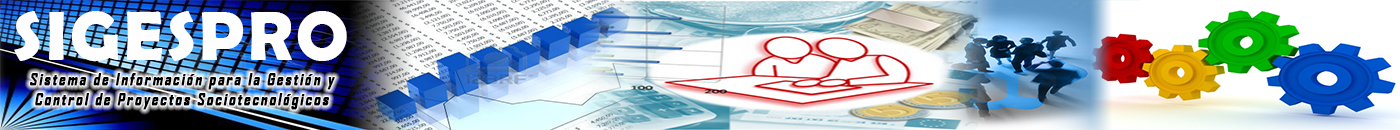
<style>
.page{position:relative;width:1400px;height:130px}
.page>*{position:absolute;margin:0}
.t1{font:70px "BerlinSansFBDemi-Bold";letter-spacing:0.05em;color:#fefefe}
.t2{font:16px "AgencyFB-Bold";letter-spacing:0.1em;color:#000000;font-weight:bold;font-style:italic}
</style>
<div class="page">
<p class="t1" style="left:14px;top:11px;width:333px;height:50px">SIGESPRO</p>
<p class="t2" style="left:29px;top:73px;width:306px;height:37px;text-align:center">Sistema de Información para la Gestión y<br>Control de Proyectos Sociotecnológicos</p>
</div>
